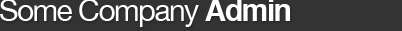
<style>
.page{position:relative;width:402px;height:31px;background:#333333}
.page>*{position:absolute;margin:0}
.t1{font:30px "HelveticaNeue";letter-spacing:-0.05em;color:#ffffff}
.t2{font:30px "Helvetica-Bold";letter-spacing:-0.05em;color:#ffffff}
</style>
<div class="page">
<p class="t1" style="left:0px;top:0px;width:290px;height:27px">Some Company <span class="t2">Admin</span></p>
</div>
